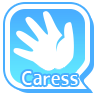
<style>
.page{position:relative;width:96px;height:96px;background:#ffffff}
.page>*{position:absolute;margin:0}
.t1{font:18px "JK-Gothic-M";color:#ffffff}
</style>
<div class="page">
<p class="t1" style="left:22px;top:71px;width:56px;height:15px">Caress</p>
</div>
